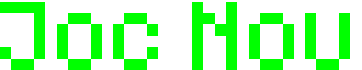
<style>
.page{position:relative;width:362px;height:70px;background:#ffffff}
.page>*{position:absolute;margin:0}
.t1{font:57px "Pixeled";color:#00ff00}
</style>
<div class="page">
<p class="t1" style="left:0px;top:2px;width:350px;height:68px">Joc Nou</p>
</div>
